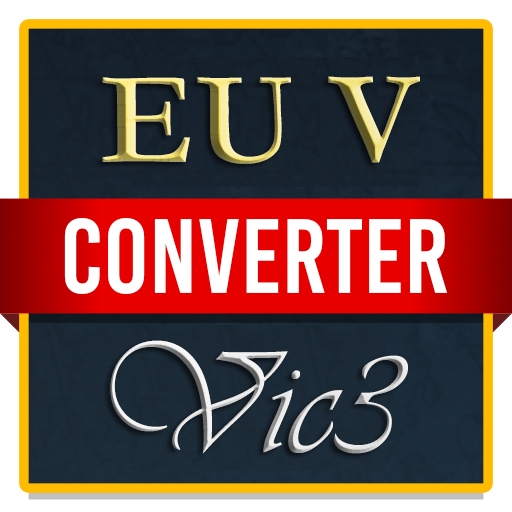
<style>
.page{position:relative;width:512px;height:512px}
.page>*{position:absolute;margin:0}
.t1{font:133.3px "Garamond-Bold"}
.t2{font:150px "Vivaldii"}
</style>
<div class="page">
<p class="t1" style="left:102px;top:76px;width:318px;height:378px;text-align:center">EU V<br><br><span class="t2">Vic3</span></p>
</div>
